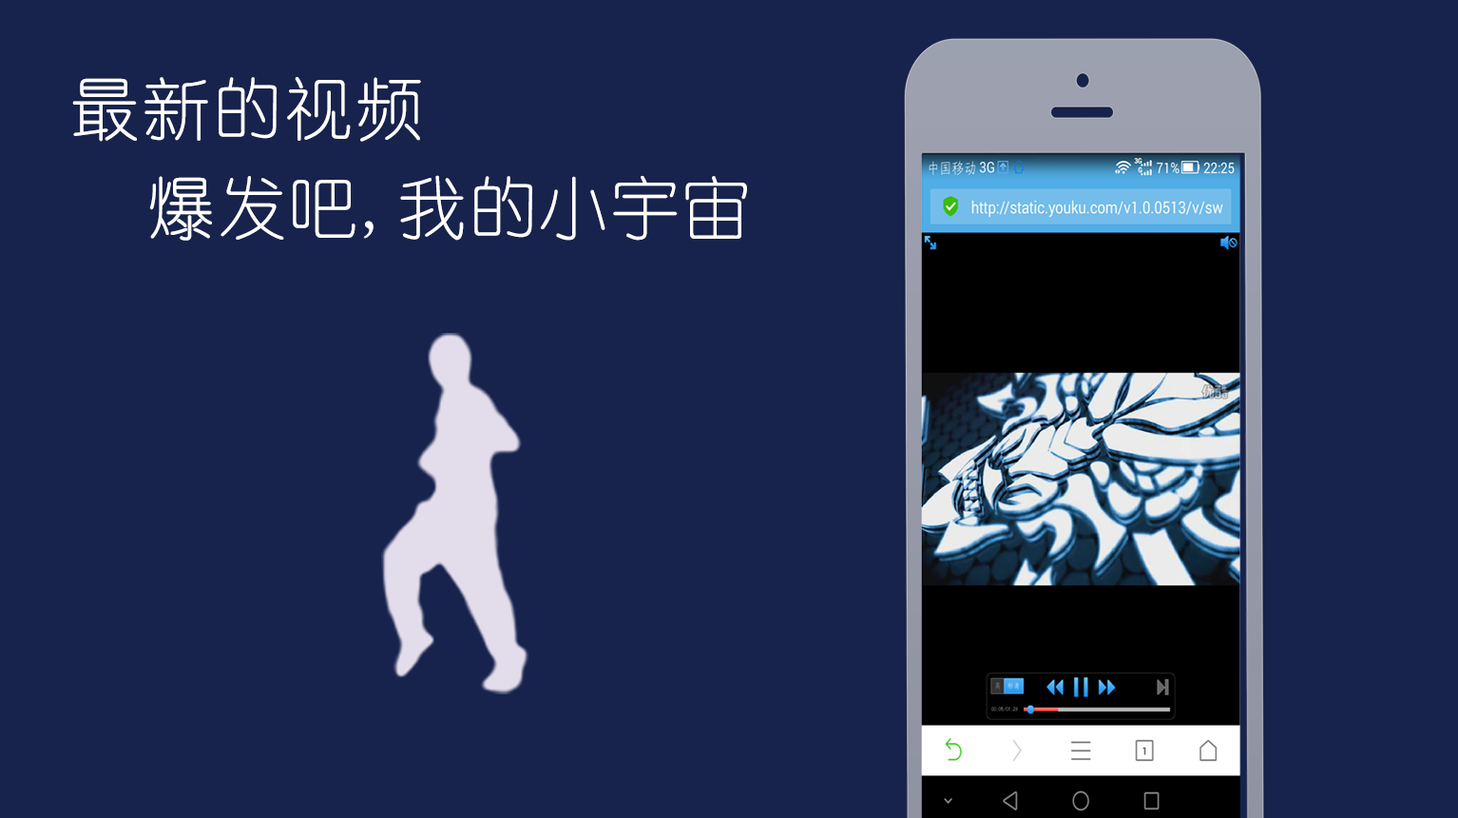
<style>
.page{position:relative;width:1458px;height:818px;background:#17234d}
.page>*{position:absolute;margin:0}
.t1{font:68.5px "YouYuan";letter-spacing:0.04em;color:#ffffff}
</style>
<div class="page">
<p class="t1" style="left:72px;top:77px;width:349px;height:65px">最新的视频</p>
<p class="t1" style="left:149px;top:175px;width:598px;height:66px">爆发吧,我的小宇宙</p>
</div>
